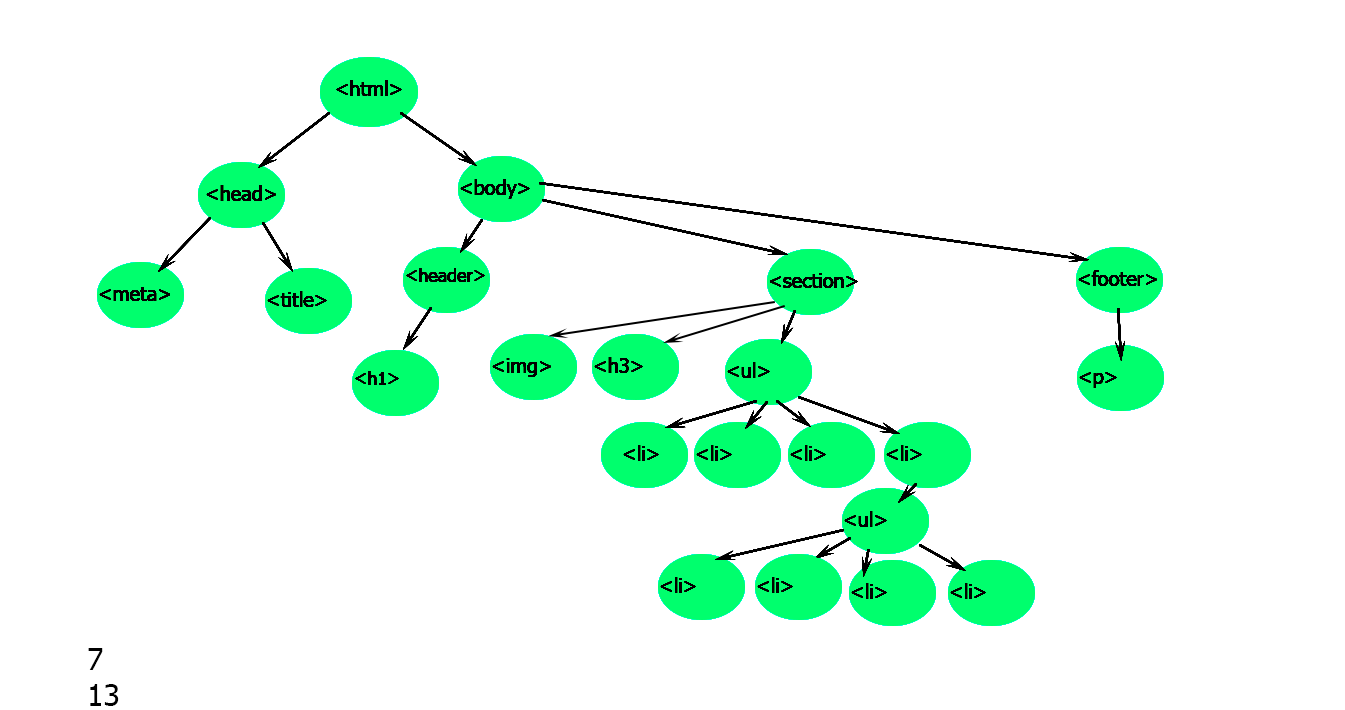
<style>
.page{position:relative;width:1345px;height:710px;background:#ffffff}
.page>*{position:absolute;margin:0}
.t1{font:20px "Tahoma";color:#000000}
.t2{font:18px "Tahoma";color:#000000}
.t3{font:30px "Tahoma";color:#000000}
</style>
<div class="page">
<p class="t1" style="left:336px;top:80px;width:66px;height:16px">&lt;html&gt;</p>
<p class="t1" style="left:206px;top:185px;width:70px;height:16px">&lt;head&gt;</p>
<p class="t1" style="left:460px;top:179px;width:70px;height:20px">&lt;body&gt;</p>
<p class="t2" style="left:406px;top:268px;width:79px;height:14px">&lt;header&gt;</p>
<p class="t1" style="left:1078px;top:270px;width:79px;height:16px">&lt;footer&gt;</p>
<p class="t1" style="left:770px;top:273px;width:88px;height:15px">&lt;section&gt;</p>
<p class="t1" style="left:99px;top:287px;width:71px;height:14px">&lt;meta&gt;</p>
<p class="t1" style="left:267px;top:291px;width:60px;height:16px">&lt;title&gt;</p>
<p class="t1" style="left:492px;top:358px;width:59px;height:19px">&lt;img&gt;</p>
<p class="t1" style="left:594px;top:357px;width:49px;height:16px">&lt;h3&gt;</p>
<p class="t1" style="left:727px;top:362px;width:43px;height:16px">&lt;ul&gt;</p>
<p class="t2" style="left:355px;top:371px;width:44px;height:14px">&lt;h1&gt;</p>
<p class="t1" style="left:1079px;top:372px;width:38px;height:16px">&lt;p&gt;</p>
<p class="t1" style="left:623px;top:445px;width:36px;height:16px">&lt;li&gt;</p>
<p class="t1" style="left:696px;top:445px;width:36px;height:16px">&lt;li&gt;</p>
<p class="t1" style="left:790px;top:445px;width:36px;height:16px">&lt;li&gt;</p>
<p class="t1" style="left:886px;top:445px;width:36px;height:16px">&lt;li&gt;</p>
<p class="t1" style="left:844px;top:511px;width:43px;height:16px">&lt;ul&gt;</p>
<p class="t1" style="left:660px;top:577px;width:36px;height:16px">&lt;li&gt;</p>
<p class="t1" style="left:757px;top:577px;width:36px;height:16px">&lt;li&gt;</p>
<p class="t1" style="left:851px;top:583px;width:36px;height:16px">&lt;li&gt;</p>
<p class="t1" style="left:950px;top:583px;width:36px;height:16px">&lt;li&gt;</p>
<p class="t3" style="left:88px;top:648px;width:31px;height:58px;text-align:right">7<br>13</p>
</div>
